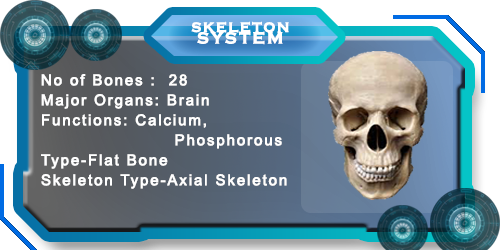
<style>
.page{position:relative;width:500px;height:250px}
.page>*{position:absolute;margin:0}
.t1{font:14px "CopperplateGothic-Bold";letter-spacing:0.1em;color:#ffffff;font-weight:bold}
.t2{font:16.5px "CopperplateGothic-Bold";letter-spacing:0.1em;color:#ffffff;font-weight:bold}
.t3{font:15px/20px "ArialMT";letter-spacing:0.1em;color:#ffffff;font-weight:bold}
</style>
<div class="page">
<p class="t1" style="left:191px;top:21px;width:98px;height:12px">SKELETON</p>
<p class="t2" style="left:197px;top:31px;width:86px;height:14px">SYSTEM</p>
<p class="t3" style="left:41px;top:74px;width:246px;height:115px">No of Bones :  28 <br>Major Organs: Brain<br>Functions: Calcium,<br>                      Phosphorous<br>Type-Flat Bone<br>Skeleton Type-Axial Skeleton</p>
</div>
